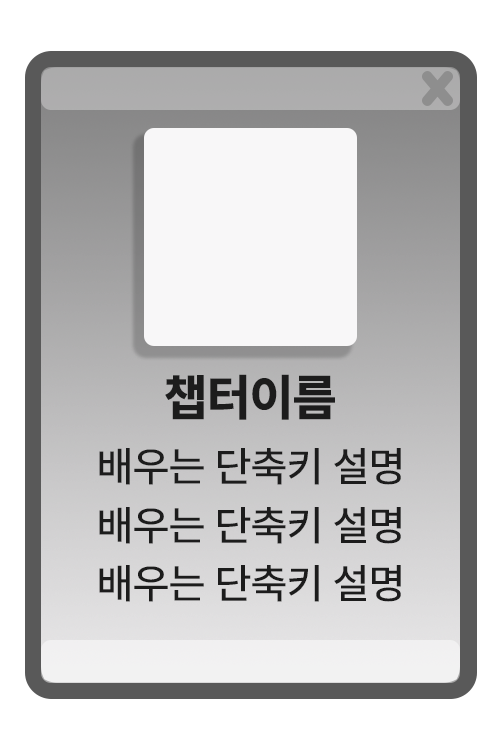
<style>
.page{position:relative;width:500px;height:750px;background:#ffffff}
.page>*{position:absolute;margin:0}
.t1{font:50px "Pretendard-ExtraBold";color:#1c1c1c}
.t2{font:41.7px/58.3px "Pretendard-Medium";color:#1c1c1c}
</style>
<div class="page">
<p class="t1" style="left:165px;top:374px;width:170px;height:46px">챕터이름</p>
<p class="t2" style="left:99px;top:448px;width:302px;height:154px;text-align:center">배우는 단축키 설명<br>배우는 단축키 설명<br>배우는 단축키 설명</p>
</div>
